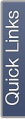
<style>
.page{position:relative;width:25px;height:119px}
.page>*{position:absolute;margin:0}
.t1{font:18px "HelveticaNeue-Light";color:#f3f3f3;font-weight:bold}
</style>
<div class="page">
<p class="t1" style="left:5px;top:10px;width:15px;height:95px;rotate:-90deg">Quick Links</p>
</div>
